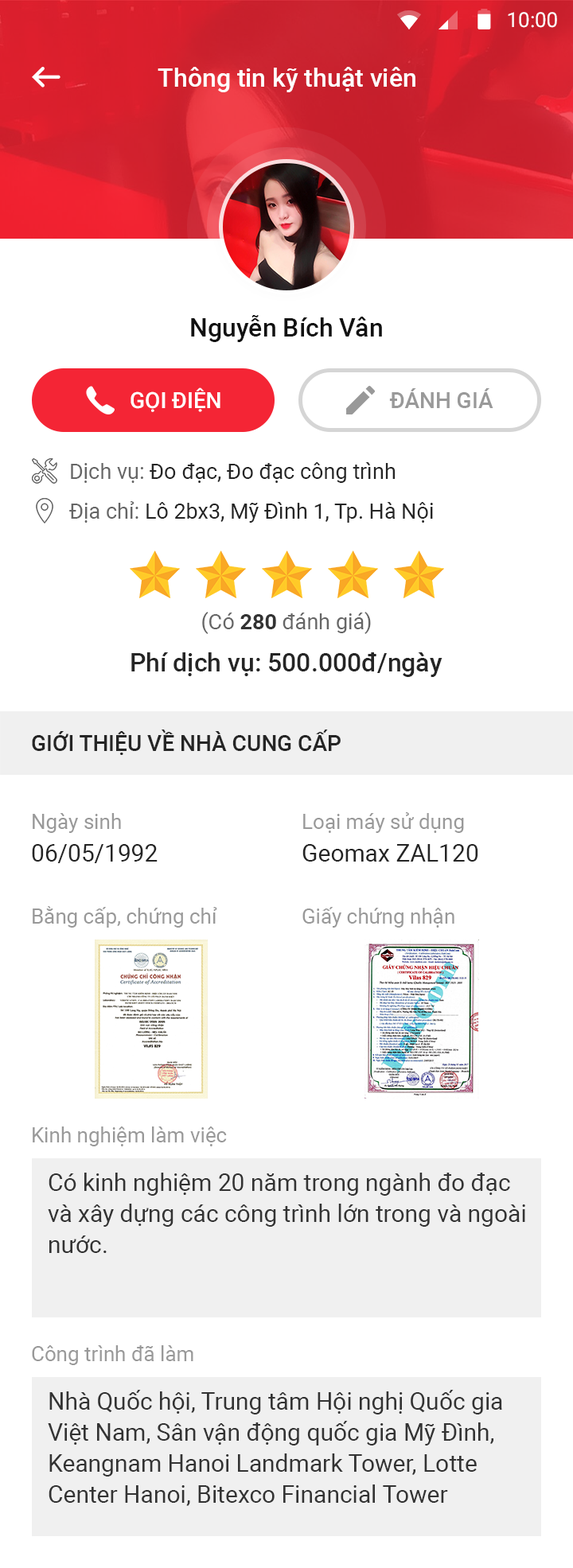
<style>
.page{position:relative;width:573px;height:1568px;background:#ffffff}
.page>*{position:absolute;margin:0}
.t1{font:20.7px "Roboto-Regular";color:#ffffff}
.t2{font:25.5px "Roboto-Medium";color:#ffffff}
.t3{font:25.5px "Roboto-Medium";color:#111111}
.t4{font:22.3px "Roboto-Medium";color:#ffffff;text-transform:uppercase}
.t5{font:22.3px "Roboto-Medium";color:#999999;text-transform:uppercase}
.t6{font:21.5px/39.8px "Roboto-Regular";color:#252525}
.t7{font:21.5px/39.8px "Roboto-Regular";color:#666666}
.t8{font:21.5px "Roboto-Regular";color:#666666}
.t9{font:21.5px "Roboto-Bold";color:#333333}
.t10{font:25.5px "Roboto-Medium";color:#252525}
.t11{font:22.3px "Roboto-Medium";color:#252525;text-transform:uppercase}
.t12{font:20.7px "Roboto-Regular";color:#999999}
.t13{font:23.9px "Roboto-Regular";color:#252525}
.t14{font:23.9px/31px "Roboto-Regular";color:#333333}
</style>
<div class="page">
<p class="t1" style="left:508px;top:12px;width:49px;height:16px">10:00</p>
<p class="t2" style="left:158px;top:67px;width:257px;height:25px">Thông tin kỹ thuật viên</p>
<p class="t3" style="left:191px;top:315px;width:191px;height:27px">Nguyễn Bích Vân</p>
<p class="t4" style="left:130px;top:387px;width:90px;height:25px">gọi điện</p>
<p class="t5" style="left:389px;top:388px;width:104px;height:20px">đánh giá</p>
<p class="t6" style="left:69px;top:462px;width:364px;height:61px"><span class="t7">Dịch vụ: </span>Đo đạc, Đo đạc công trình<br><span class="t7">Địa chỉ: </span>Lô 2bx3, Mỹ Đình 1, Tp. Hà Nội</p>
<p class="t8" style="left:202px;top:612px;width:169px;height:22px">(Có <span class="t9">280</span> đánh giá)</p>
<p class="t10" style="left:131px;top:652px;width:311px;height:25px">Phí dịch vụ: 500.000đ/ngày</p>
<p class="t11" style="left:32px;top:730px;width:308px;height:25px">Giới thiệu về nhà cung cấp</p>
<p class="t12" style="left:33px;top:813px;width:88px;height:20px">Ngày sinh</p>
<p class="t12" style="left:303px;top:812px;width:161px;height:21px">Loại máy sử dụng</p>
<p class="t13" style="left:32px;top:844px;width:126px;height:19px">06/05/1992</p>
<p class="t13" style="left:302px;top:844px;width:176px;height:18px">Geomax ZAL120</p>
<p class="t12" style="left:33px;top:906px;width:184px;height:22px">Bằng cấp, chứng chỉ</p>
<p class="t12" style="left:302px;top:907px;width:152px;height:21px">Giấy chứng nhận</p>
<p class="t12" style="left:33px;top:1126px;width:194px;height:20px">Kinh nghiệm làm việc</p>
<p class="t14" style="left:48px;top:1173px;width:477px;height:80px">Có kinh nghiệm 20 năm trong ngành đo đạc<br>và xây dựng các công trình lớn trong và ngoài<br>nước.</p>
<p class="t12" style="left:32px;top:1345px;width:161px;height:20px">Công trình đã làm</p>
<p class="t14" style="left:48px;top:1390px;width:454px;height:116px">Nhà Quốc hội, Trung tâm Hội nghị Quốc gia<br>Việt Nam, Sân vận động quốc gia Mỹ Đình, <br>Keangnam Hanoi Landmark Tower, Lotte<br>Center Hanoi, Bitexco Financial Tower</p>
</div>
